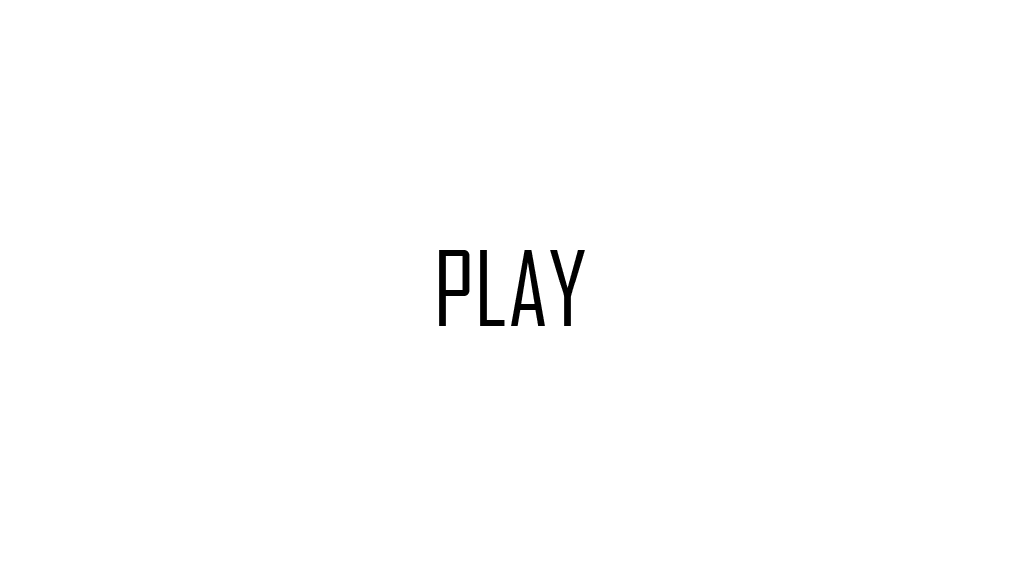
<style>
.page{position:relative;width:1024px;height:576px;background:#ffffff}
.page>*{position:absolute;margin:0}
.t1{font:100px "AgencyFB-Reg";color:#000000}
</style>
<div class="page">
<p class="t1" style="left:439px;top:250px;width:146px;height:76px">PLAY</p>
</div>
